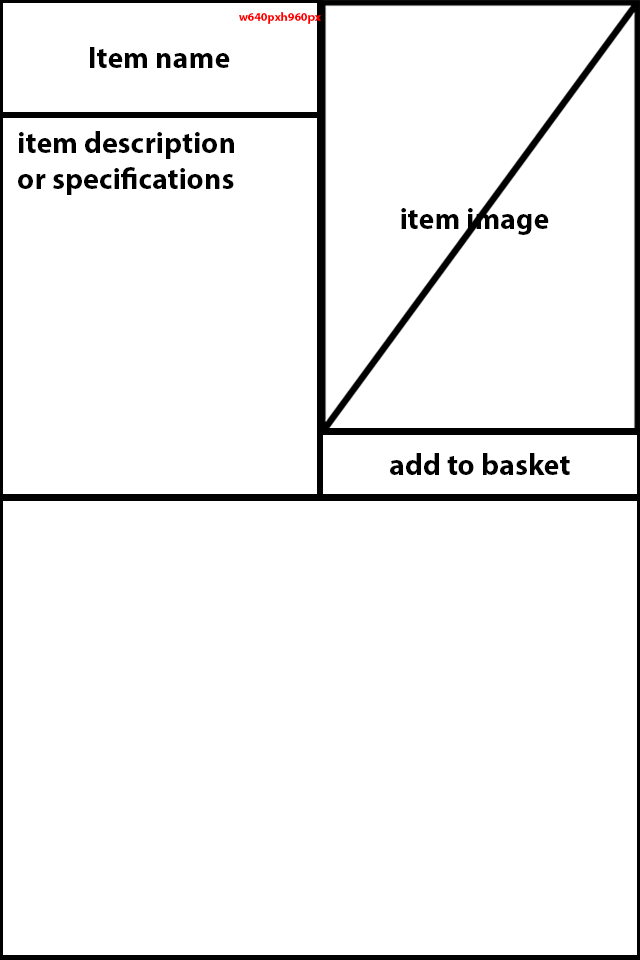
<style>
.page{position:relative;width:640px;height:960px;background:#ffffff}
.page>*{position:absolute;margin:0}
.t1{font:12px "MyriadPro-Bold";color:#ff0000}
.t2{font:30px "MyriadPro-Bold";color:#000000}
</style>
<div class="page">
<p class="t1" style="left:239px;top:12px;width:82px;height:12px">w640pxh960px</p>
<p class="t2" style="left:90px;top:47px;width:140px;height:21px">Item name</p>
<p class="t2" style="left:18px;top:131px;width:216px;height:64px">item description <br>or specifications</p>
<p class="t2" style="left:401px;top:208px;width:148px;height:27px">item image</p>
<p class="t2" style="left:390px;top:453px;width:180px;height:22px">add to basket</p>
</div>
